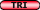
<style>
.page{position:relative;width:40px;height:10px}
.page>*{position:absolute;margin:0}
.t1{font:8px "Verdana-Bold";color:#0d0d0d}
</style>
<div class="page">
<p class="t1" style="left:11px;top:1px;width:16px;height:8px">TRI</p>
</div>
